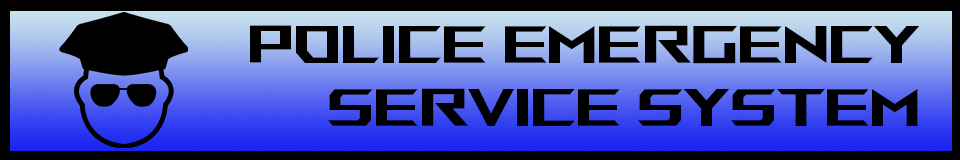
<style>
.page{position:relative;width:960px;height:160px;background:#000000}
.page>*{position:absolute;margin:0}
.t1{font:52.9px "ROGFonts-Regular";color:#000000}
</style>
<div class="page">
<p class="t1" style="left:250px;top:25px;width:670px;height:39px">POLICE EMERGENCY</p>
<p class="t1" style="left:328px;top:88px;width:590px;height:38px">SERVICE SYSTEM</p>
</div>
